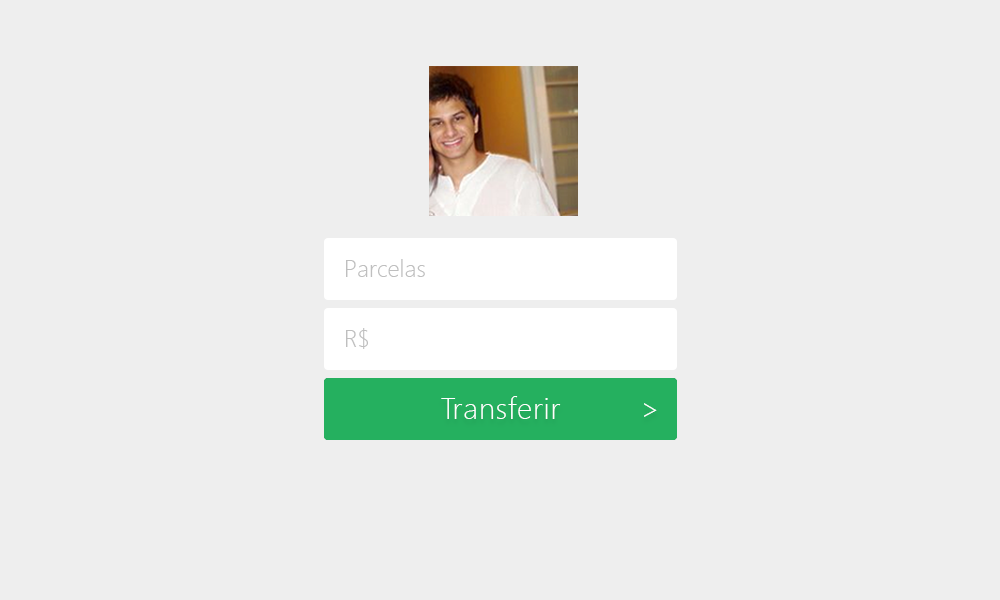
<style>
.page{position:relative;width:1000px;height:600px;background:#eeeeee}
.page>*{position:absolute;margin:0}
.t1{font:24px "SegoeUI-Light";color:#bfbfbf}
.t2{font:30px "SegoeUI-Light";letter-spacing:0.025em;color:#ffffff}
</style>
<div class="page">
<p class="t1" style="left:346px;top:259px;width:79px;height:18px">Parcelas</p>
<p class="t1" style="left:346px;top:328px;width:22px;height:21px">R$</p>
<p class="t2" style="left:441px;top:396px;width:120px;height:23px">Transferir</p>
<p class="t2" style="left:644px;top:403px;width:13px;height:14px">&gt;</p>
</div>
